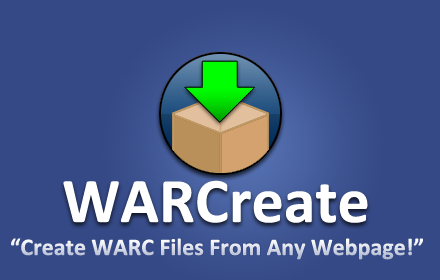
<style>
.page{position:relative;width:440px;height:280px;background:#354986}
.page>*{position:absolute;margin:0}
.t1{font:64px "Calibri-Bold";color:#ffffff}
.t2{font:24px "Calibri-Bold"}
</style>
<div class="page">
<p class="t1" style="left:63px;top:180px;width:305px;height:43px">WARCreate</p>
<p class="t2" style="left:11px;top:238px;width:412px;height:22px">“Create WARC Files From Any Webpage!”</p>
</div>
